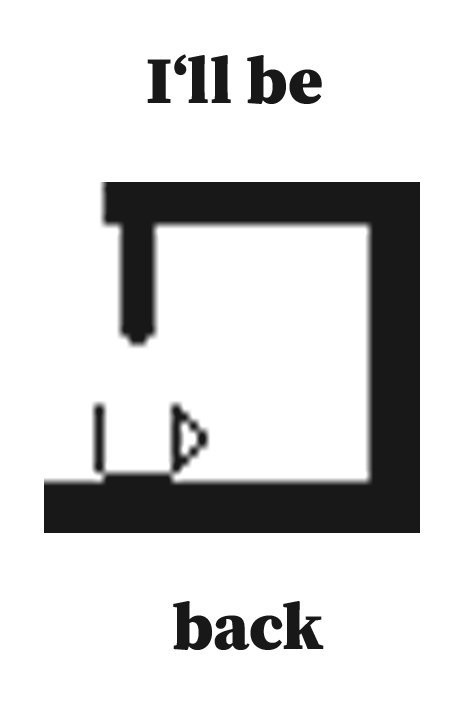
<style>
.page{position:relative;width:464px;height:716px;background:#ffffff}
.page>*{position:absolute;margin:0}
.t1{font:66.7px "SourceSerifRoman-Black";color:#181818}
</style>
<div class="page">
<p class="t1" style="left:147px;top:54px;width:175px;height:50px">I‘ll be</p>
<p class="t1" style="left:173px;top:601px;width:151px;height:49px">back</p>
</div>
